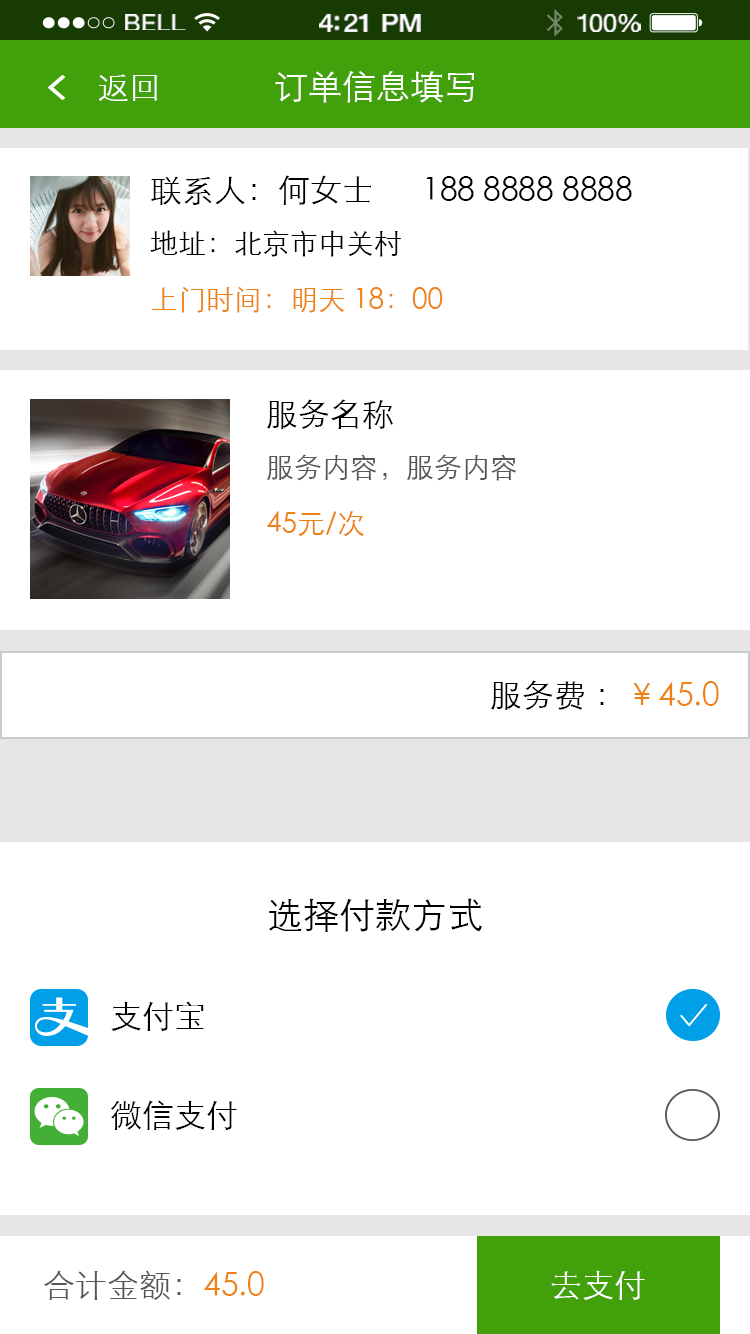
<style>
.page{position:relative;width:750px;height:1334px;background:#ffffff}
.page>*{position:absolute;margin:0}
.t1{font:23.3px "HelveticaNeue";letter-spacing:0.02em;color:#ffffff;scale:1.06 1}
.t2{font:25.3px "HelveticaNeue-Medium";letter-spacing:-0.02em;color:#ffffff;scale:1.06 1}
.t3{font:24.3px "HelveticaNeue";letter-spacing:-0.02em;color:#ffffff;scale:1.06 1}
.t4{font:32px "STXihei";color:#ffffff}
.t5{font:34px "STXihei";color:#ffffff}
.t6{font:32px/56px "STXihei";color:#000000}
.t7{font:28px/56px "STXihei";color:#000000}
.t8{font:28px/56px "STXihei";color:#ef8014}
.t9{font:28px/56px "STXihei";color:#595757}
.t10{font:28px/56px "STXihei";color:#ef8013}
.t11{font:32px "STXihei";color:#000000}
.t12{font:32px "STXihei";color:#ef8014}
.t13{font:36px "STXihei";color:#000000}
.t14{font:32px "STXihei";color:#595757}
</style>
<div class="page">
<p class="t1" style="left:125px;top:14px;width:61px;height:16px">BELL</p>
<p class="t2" style="left:319px;top:14px;width:102px;height:18px">4:21 PM</p>
<p class="t3" style="left:577px;top:14px;width:64px;height:18px">100%</p>
<p class="t4" style="left:98px;top:74px;width:59px;height:27px">返回</p>
<p class="t5" style="left:275px;top:71px;width:199px;height:32px">订单信息填写</p>
<p class="t6" style="left:150px;top:175px;width:482px;height:138px">联系人：何女士      188 8888 8888<br><span class="t7">地址：北京市中关村    <br></span><span class="t8">上门时间：明天 18：00</span></p>
<p class="t9" style="left:266px;top:399px;width:251px;height:138px"><span class="t6">服务名称<br></span>服务内容，服务内容<br><span class="t10">45元/次</span></p>
<p class="t11" style="left:491px;top:680px;width:228px;height:30px">服务费 ：<span class="t12">￥45.0</span></p>
<p class="t13" style="left:269px;top:898px;width:213px;height:34px">选择付款方式</p>
<p class="t11" style="left:111px;top:1001px;width:93px;height:30px">支付宝</p>
<p class="t11" style="left:111px;top:1100px;width:126px;height:30px">微信支付</p>
<p class="t14" style="left:44px;top:1270px;width:220px;height:30px">合计金额：<span class="t12">45.0</span></p>
<p class="t4" style="left:551px;top:1270px;width:94px;height:30px">去支付</p>
</div>
